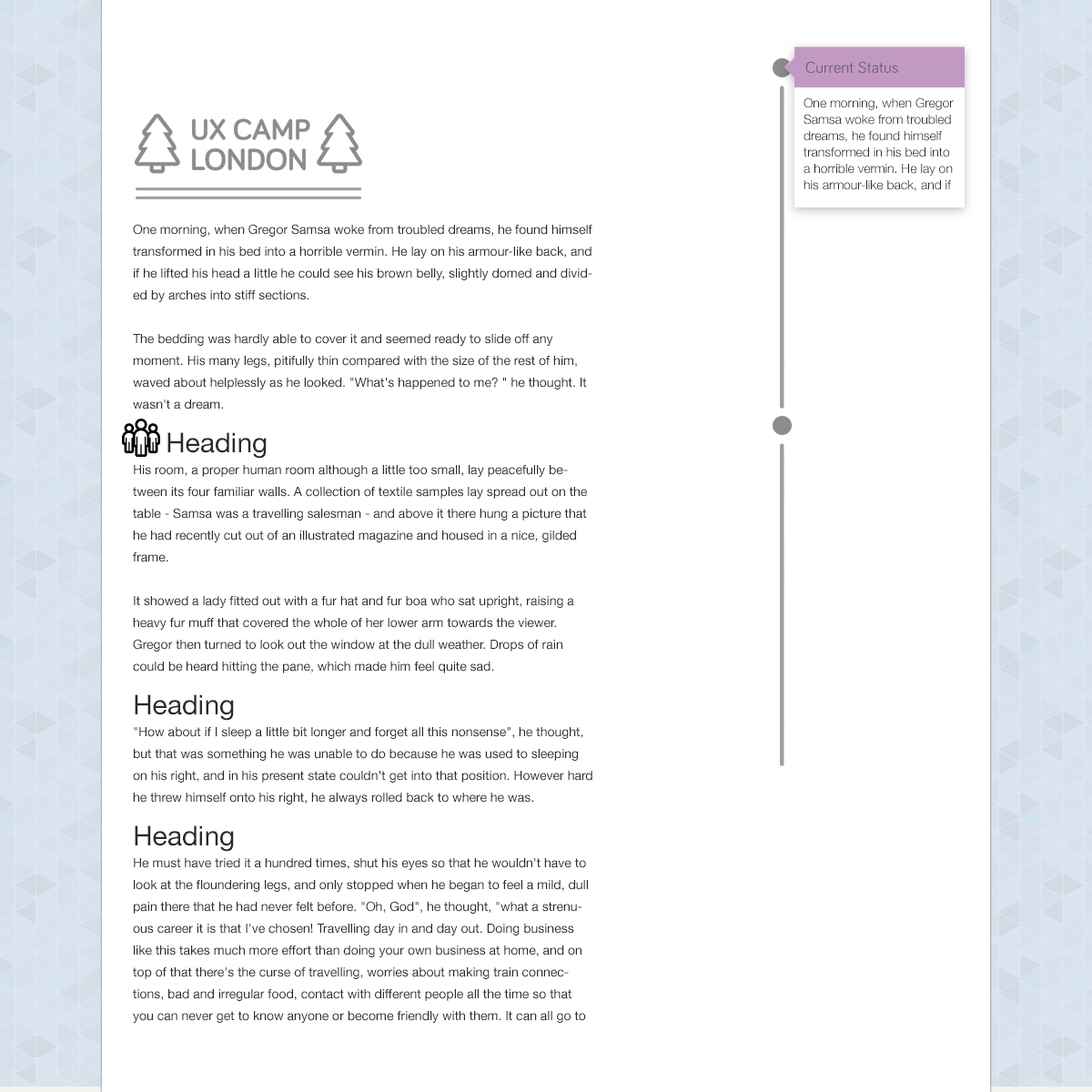
<style>
.page{position:relative;width:1092px;height:1092px;background:#ffffff}
.page>*{position:absolute;margin:0}
.t1{font:16.4px "Bariol-Regular";color:#5a5a5a}
.t2{font:12.7px/16.4px "HelveticaNeue-Light";color:#2a2a2a}
.t3{font:12.7px/21.8px "HelveticaNeue";color:#2a2a2a}
.t4{font:27.3px/21.8px "HelveticaNeue";color:#2a2a2a}
</style>
<div class="page">
<p class="t1" style="left:805px;top:61px;width:93px;height:13px;opacity:0.9">Current Status</p>
<p class="t2" style="left:804px;top:97px;width:150px;height:94px">One morning, when Gregor Samsa woke from troubled dreams, he found himself transformed in his bed into a horrible vermin. He lay on his armour-like back, and if he lifted his head a little he could see his brown belly,</p>
<p class="t3" style="left:133px;top:224px;width:459px;height:799px">One morning, when Gregor Samsa woke from troubled dreams, he found himself transformed in his bed into a horrible vermin. He lay on his armour-like back, and if he lifted his head a little he could see his brown belly, slightly domed and divided by arches into stiff sections.<br><br>The bedding was hardly able to cover it and seemed ready to slide off any moment. His many legs, pitifully thin compared with the size of the rest of him, waved about helplessly as he looked. "What's happened to me? " he thought. It wasn't a dream.<br><br><span class="t4"> Heading<br></span>His room, a proper human room although a little too small, lay peacefully between its four familiar walls. A collection of textile samples lay spread out on the table - Samsa was a travelling salesman - and above it there hung a picture that he had recently cut out of an illustrated magazine and housed in a nice, gilded frame.<br><br>It showed a lady fitted out with a fur hat and fur boa who sat upright, raising a heavy fur muff that covered the whole of her lower arm towards the viewer. Gregor then turned to look out the window at the dull weather. Drops of rain could be heard hitting the pane, which made him feel quite sad.<br><br><span class="t4">Heading<br></span>"How about if I sleep a little bit longer and forget all this nonsense", he thought, but that was something he was unable to do because he was used to sleeping on his right, and in his present state couldn't get into that position. However hard he threw himself onto his right, he always rolled back to where he was.<br><br><span class="t4">Heading<br></span>He must have tried it a hundred times, shut his eyes so that he wouldn't have to look at the floundering legs, and only stopped when he began to feel a mild, dull pain there that he had never felt before. "Oh, God", he thought, "what a strenuous career it is that I've chosen! Travelling day in and day out. Doing business like this takes much more effort than doing your own business at home, and on top of that there's the curse of travelling, worries about making train connections, bad and irregular food, contact with different people all the time so that you can never get to know anyone or become friendly with them. It can all go to Hell! " He felt a slight itch</p>
</div>
